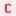
<style>
.page{position:relative;width:16px;height:16px;background:#fdeaef}
.page>*{position:absolute;margin:0}
.t1{font:12px "Krungthep";letter-spacing:0.1em;color:#df3b53;text-transform:uppercase}
</style>
<div class="page">
<p class="t1" style="left:4px;top:3px;width:7px;height:10px">c</p>
</div>
